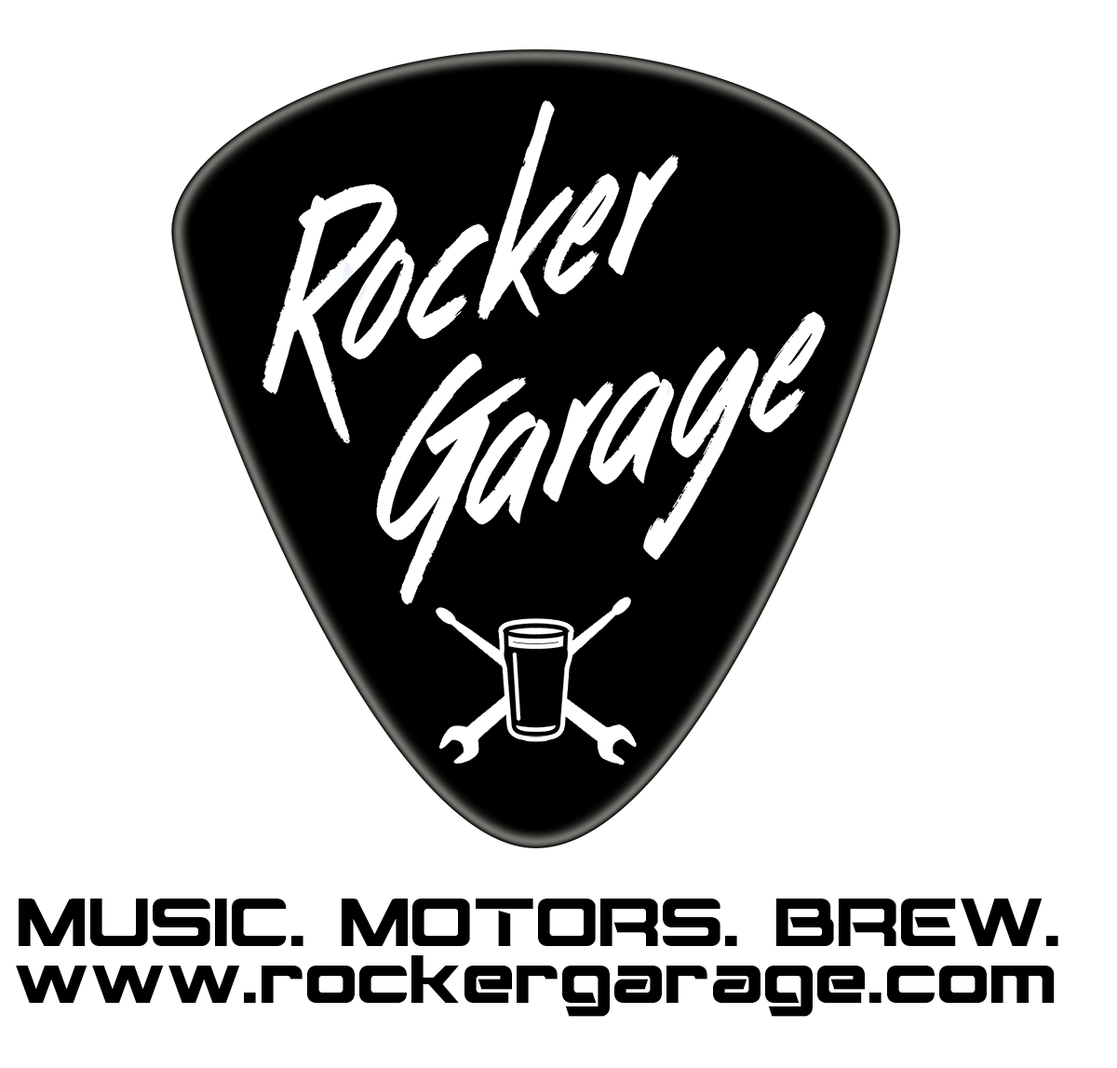
<style>
.page{position:relative;width:1117px;height:1068px;background:#ffffff}
.page>*{position:absolute;margin:0}
.t1{font:69.2px "Montalban";color:#000000}
</style>
<div class="page">
<p class="t1" style="left:19px;top:898px;width:1039px;height:48px">MUSIC. MOTORS. BREW.</p>
<p class="t1" style="left:16px;top:955px;width:1039px;height:61px">www.rockergarage.com</p>
</div>
